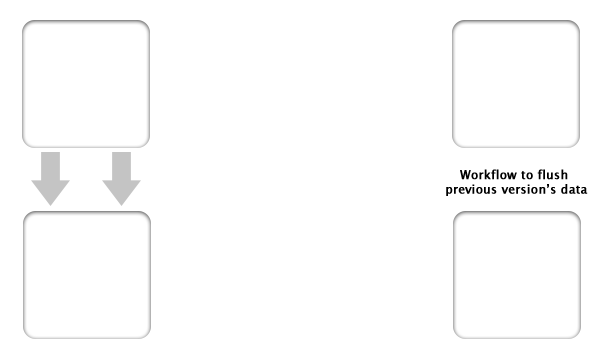
<style>
.page{position:relative;width:600px;height:360px;background:#ffffff}
.page>*{position:absolute;margin:0}
.t1{font:12px "LucidaGrande";color:#000000;font-weight:bold}
</style>
<div class="page">
<p class="t1" style="left:446px;top:169px;width:142px;height:27px;text-align:center">Workflow to flush<br> previous version’s data</p>
</div>
